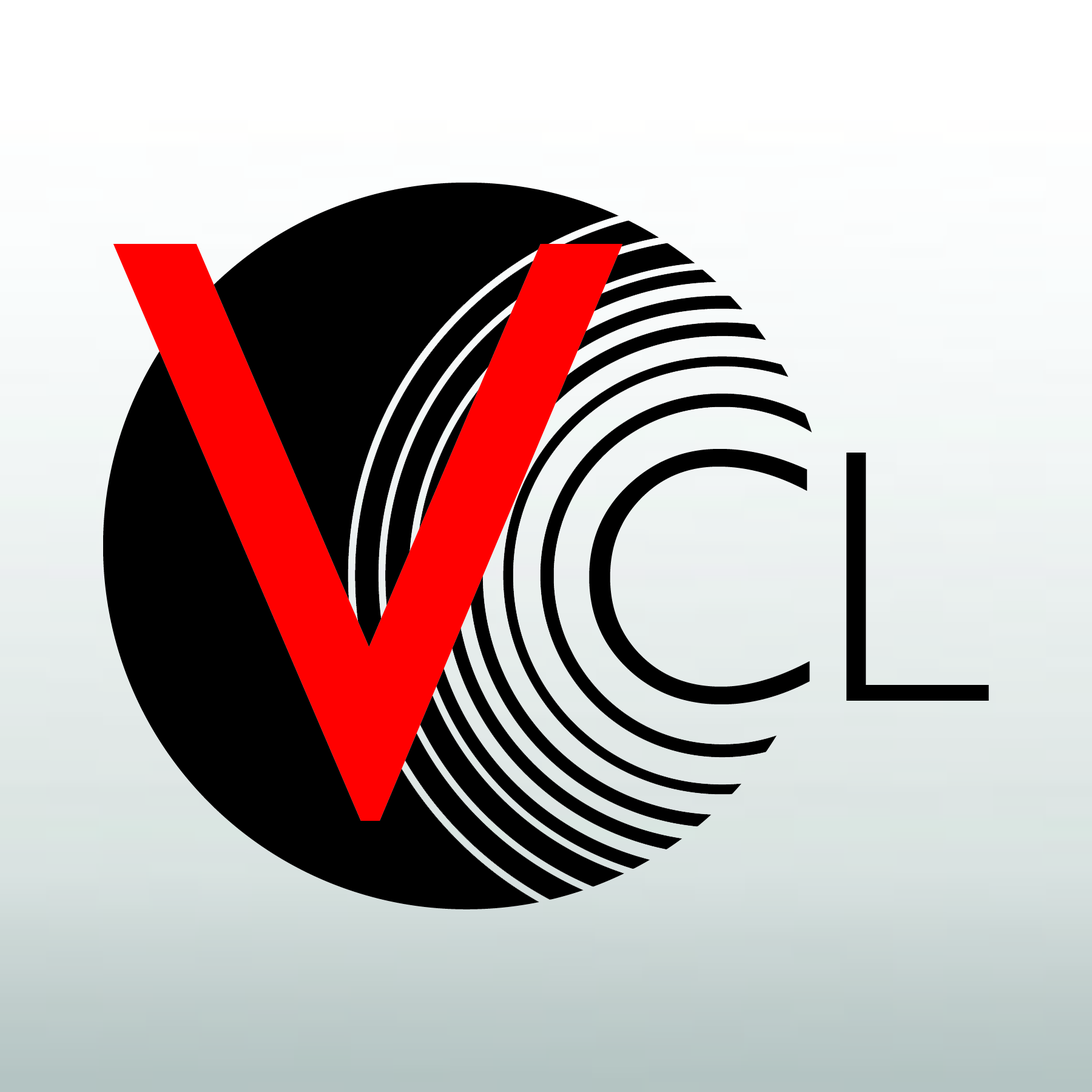
<style>
.page{position:relative;width:1092px;height:1092px}
.page>*{position:absolute;margin:0}
.t1{font:842.6px "GillSans";color:#ff0000}
.t2{font:364px "GillSans-Light";color:#000000}
</style>
<div class="page">
<p class="t1" style="left:113px;top:244px;width:510px;height:577px">V</p>
<p class="t2" style="left:589px;top:449px;width:400px;height:255px">CL</p>
</div>
